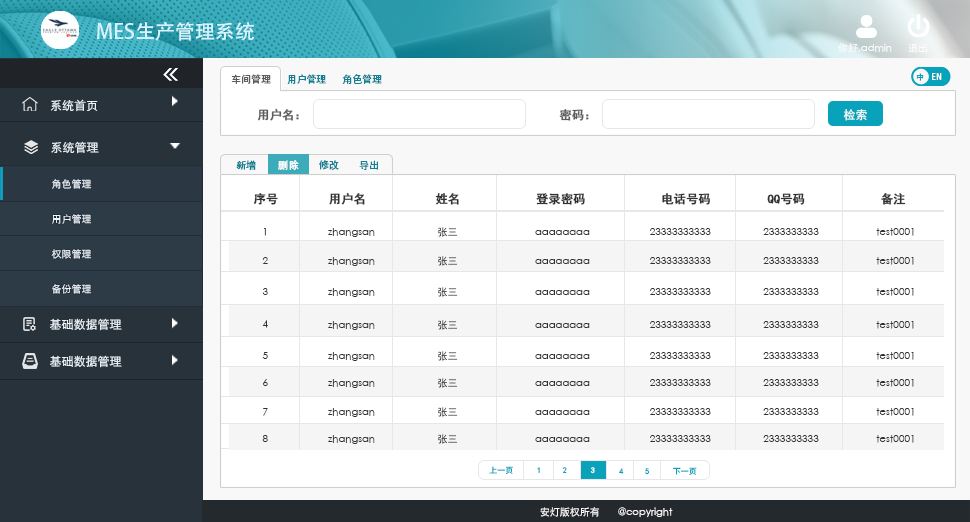
<style>
.page{position:relative;width:970px;height:522px;background:#ffffff}
.page>*{position:absolute;margin:0}
.t1{font:20px "AdobeHeitiStd-Regular";color:#d6f4ff}
.t2{font:10px "STXihei";color:#fffbfd}
.t3{font:10px "AdobeHeitiStd-Regular";color:#128092}
.t4{font:10px "AdobeHeitiStd-Regular";color:#5d5d5d}
.t5{font:8px "AdobeHeitiStd-Regular";color:#08a2ba}
.t6{font:8px "AdobeHeitiStd-Regular";color:#ffffff}
.t7{font:12px "STXihei";color:#eff6fc}
.t8{font:12px "SimHei";color:#5d5d5d;font-weight:bold}
.t9{font:12px "SimHei";color:#ffffff}
.t10{font:10px "AdobeHeitiStd-Regular";color:#5e5e5e}
.t11{font:10px "AdobeHeitiStd-Regular";color:#ffffff}
.t12{font:10px "STXihei";color:#eff6fc}
.t13{font:12px "SimHei";color:#313131;font-weight:bold}
.t14{font:10px "STXihei";color:#313131}
.t15{font:8px "SimHei";color:#08a2ba}
.t16{font:8px "SimHei"}
.t17{font:8px "SimHei";color:#ffffff}
</style>
<div class="page">
<p class="t1" style="left:97px;top:22px;width:157px;height:19px">MES生产管理系统</p>
<p class="t2" style="left:838px;top:43px;width:54px;height:10px">你好,admin</p>
<p class="t2" style="left:908px;top:43px;width:19px;height:10px">退出</p>
<p class="t3" style="left:231px;top:74px;width:151px;height:10px"><span class="t4">车间管理       </span>用户管理       角色管理</p>
<p class="t5" style="left:916px;top:73px;width:8px;height:8px">中</p>
<p class="t6" style="left:932px;top:73px;width:10px;height:7px">EN</p>
<p class="t7" style="left:51px;top:99px;width:47px;height:13px">系统首页</p>
<p class="t8" style="left:257px;top:108px;width:42px;height:13px">用户名：</p>
<p class="t8" style="left:559px;top:109px;width:30px;height:12px">密码：</p>
<p class="t9" style="left:843px;top:109px;width:24px;height:12px">检索</p>
<p class="t7" style="left:51px;top:141px;width:48px;height:13px">系统管理</p>
<p class="t3" style="left:236px;top:160px;width:143px;height:10px"><span class="t10"> </span>新增          <span class="t11">删除         </span>修改         导出</p>
<p class="t12" style="left:52px;top:179px;width:40px;height:10px">角色管理</p>
<p class="t13" style="left:253px;top:192px;width:653px;height:13px">序号        用户名           姓名            登录密码            电话号码         QQ号码            备注</p>
<p class="t12" style="left:52px;top:214px;width:40px;height:10px">用户管理</p>
<p class="t14" style="left:263px;top:227px;width:651px;height:10px">1                        zhangsan                         张三                               aaaaaaaa                        23333333333                     2333333333                       test0001</p>
<p class="t12" style="left:51px;top:249px;width:41px;height:10px">权限管理</p>
<p class="t14" style="left:262px;top:256px;width:652px;height:10px">2                        zhangsan                         张三                               aaaaaaaa                        23333333333                     2333333333                       test0001</p>
<p class="t12" style="left:52px;top:284px;width:40px;height:10px">备份管理</p>
<p class="t14" style="left:262px;top:287px;width:652px;height:10px">3                        zhangsan                         张三                               aaaaaaaa                        23333333333                     2333333333                       test0001</p>
<p class="t7" style="left:50px;top:318px;width:72px;height:13px">基础数据管理</p>
<p class="t14" style="left:262px;top:320px;width:652px;height:10px">4                        zhangsan                         张三                               aaaaaaaa                        23333333333                     2333333333                       test0001</p>
<p class="t14" style="left:262px;top:351px;width:652px;height:10px">5                        zhangsan                         张三                               aaaaaaaa                        23333333333                     2333333333                       test0001</p>
<p class="t7" style="left:50px;top:355px;width:72px;height:13px">基础数据管理</p>
<p class="t14" style="left:263px;top:378px;width:651px;height:10px">6                        zhangsan                         张三                               aaaaaaaa                        23333333333                     2333333333                       test0001</p>
<p class="t14" style="left:263px;top:407px;width:651px;height:10px">7                        zhangsan                         张三                               aaaaaaaa                        23333333333                     2333333333                       test0001</p>
<p class="t14" style="left:262px;top:434px;width:652px;height:10px">8                        zhangsan                         张三                               aaaaaaaa                        23333333333                     2333333333                       test0001</p>
<p class="t15" style="left:489px;top:466px;width:24px;height:8px">上一页</p>
<p class="t16" style="left:537px;top:467px;width:3px;height:6px">1</p>
<p class="t15" style="left:562px;top:467px;width:5px;height:6px">2</p>
<p class="t17" style="left:590px;top:467px;width:5px;height:7px">3</p>
<p class="t15" style="left:619px;top:468px;width:5px;height:6px">4</p>
<p class="t15" style="left:645px;top:468px;width:4px;height:7px">5</p>
<p class="t15" style="left:673px;top:467px;width:24px;height:8px">下一页</p>
<p class="t2" style="left:540px;top:507px;width:133px;height:11px">安灯版权所有       @copyright</p>
</div>
